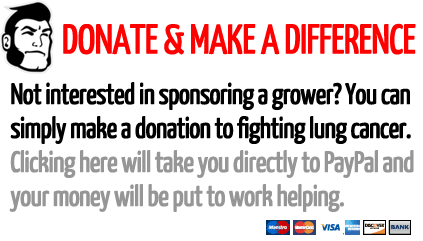
<style>
.page{position:relative;width:423px;height:241px;background:#ffffff}
.page>*{position:absolute;margin:0}
.t1{font:41.3px "YanoneKaffeesatz-Regular";letter-spacing:-0.04em;color:#ff0000;text-transform:uppercase;font-weight:bold}
.t2{font:29px/34px "YanoneKaffeesatz-Regular";letter-spacing:-0.04em;color:#000000;font-weight:bold}
.t3{font:29px/34px "YanoneKaffeesatz-Regular";letter-spacing:-0.04em;color:#969696;font-weight:bold}
</style>
<div class="page">
<p class="t1" style="left:63px;top:23px;width:353px;height:32px">donate &amp; MAKE A DIFFERENCE</p>
<p class="t2" style="left:9px;top:82px;width:405px;height:130px">Not interested in sponsoring a grower? You can<br>simply make a donation to fighting lung cancer.<br><span class="t3">Clicking here will take you directly to PayPal and<br>your money will be put to work helping.</span></p>
</div>
